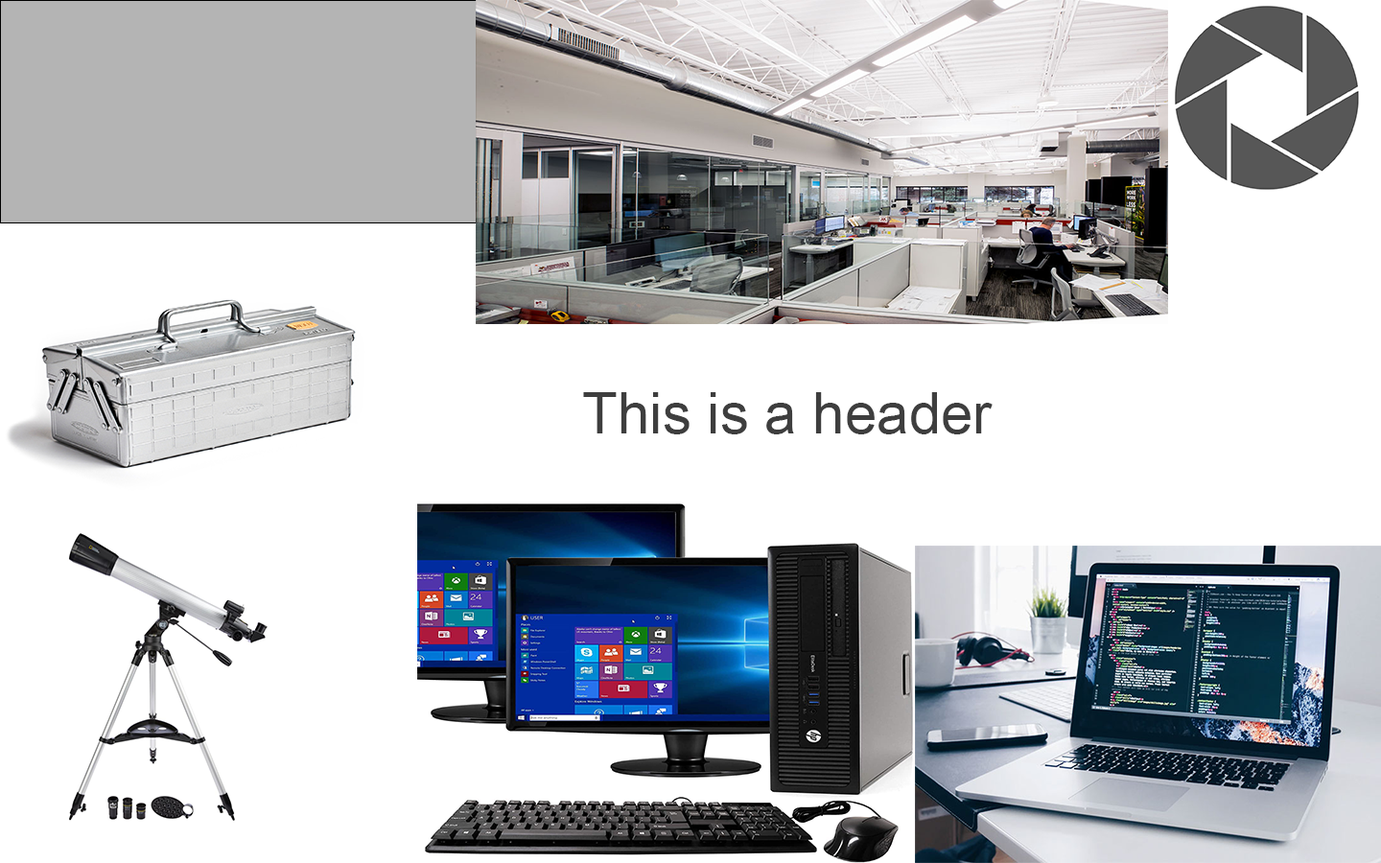
<style>
.page{position:relative;width:1381px;height:863px;background:#ffffff}
.page>*{position:absolute;margin:0}
.t1{font:57.6px "ArialMT";color:#3e3e3e}
</style>
<div class="page">
<p class="t1" style="left:583px;top:392px;width:410px;height:43px">This is a header</p>
</div>
